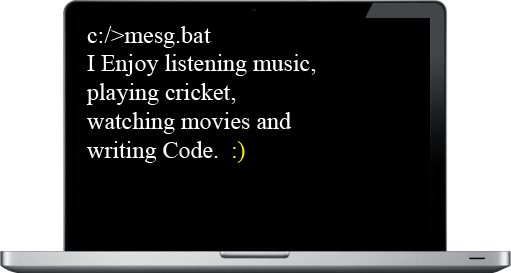
<style>
.page{position:relative;width:511px;height:273px;background:#000000}
.page>*{position:absolute;margin:0}
.t1{font:24px "TimesNewRomanPSMT";color:#ffffff}
.t2{font:24px "TimesNewRomanPSMT";color:#fff000}
</style>
<div class="page">
<p class="t1" style="left:86px;top:26px;width:230px;height:137px">c:/&gt;mesg.bat<br>I Enjoy listening music,<br>playing cricket,<br>watching movies and<br>writing Code.  <span class="t2">:)</span></p>
</div>
